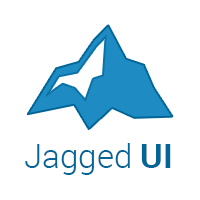
<style>
.page{position:relative;width:200px;height:200px;background:#ffffff}
.page>*{position:absolute;margin:0}
.t1{font:33px "Roboto-Light";color:#016598}
.t2{font:33px "Roboto-Bold";color:#016598}
</style>
<div class="page">
<p class="t1" style="left:25px;top:143px;width:146px;height:32px">Jagged <span class="t2">UI</span></p>
</div>
